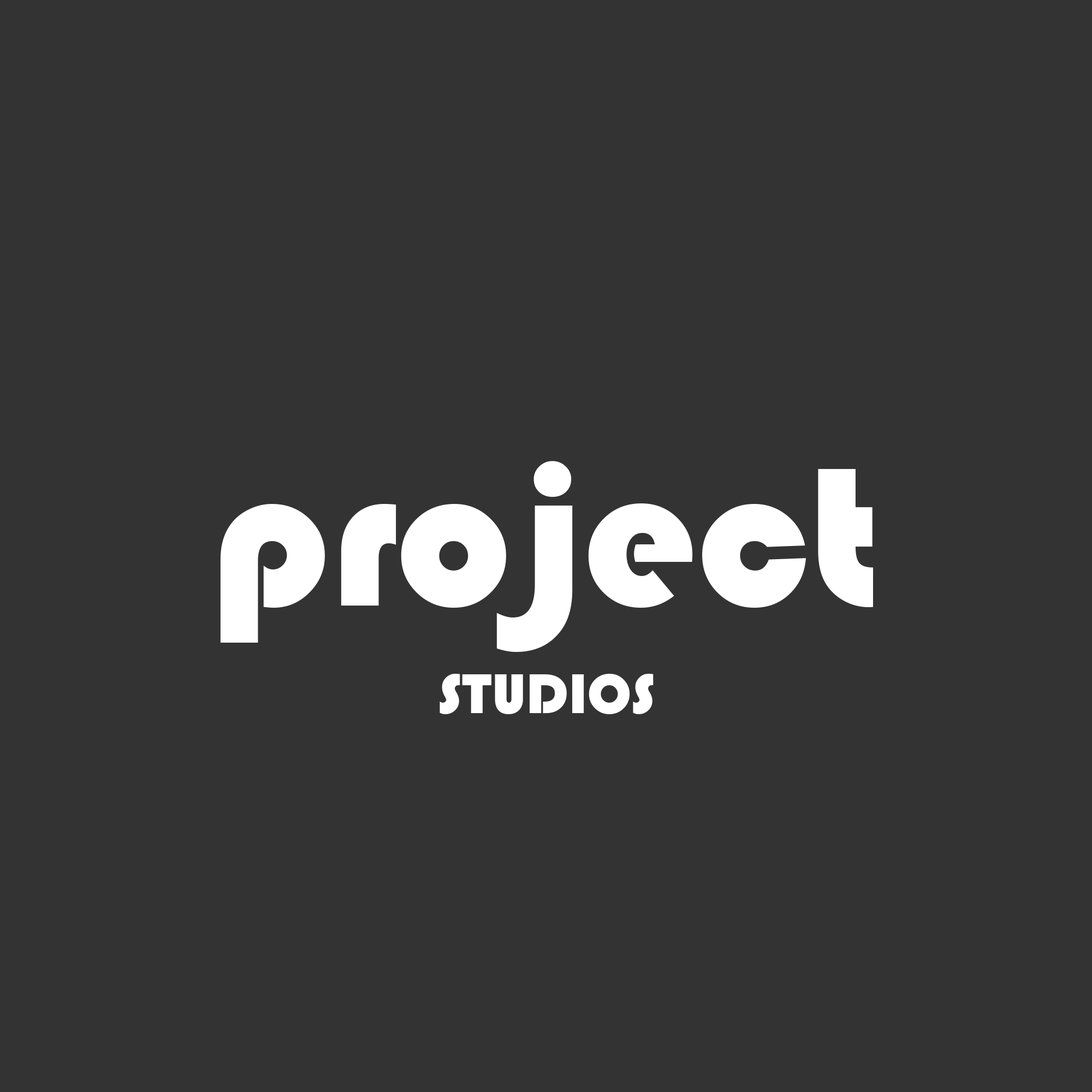
<style>
.page{position:relative;width:1092px;height:1092px;background:#333333}
.page>*{position:absolute;margin:0}
.t1{font:204.7px "Bauhaus93";color:#ffffff}
.t2{font:58px "Bauhaus93";color:#ffffff}
</style>
<div class="page">
<p class="t1" style="left:220px;top:461px;width:653px;height:191px">project</p>
<p class="t2" style="left:440px;top:674px;width:214px;height:40px">STUDIOS</p>
</div>
